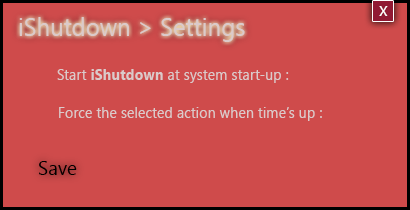
<style>
.page{position:relative;width:410px;height:210px;background:#cf4b4b}
.page>*{position:absolute;margin:0}
.t1{font:19.7px "SegoeUI";color:#ffffff;scale:0.96 1}
.t2{font:25px "SegoeUI";color:#dbcaca;scale:0.96 1}
.t3{font:15px "SegoeUI";color:#dbcaca;scale:0.96 1}
.t4{font:15px "SegoeUI-Bold";color:#dbcaca;scale:0.96 1}
.t5{font:20px "SegoeUI";color:#000000;scale:0.96 1}
</style>
<div class="page">
<p class="t1" style="left:379px;top:6px;width:9px;height:10px">x</p>
<p class="t2" style="left:19px;top:17px;width:226px;height:25px">iShutdown &gt; Settings</p>
<p class="t3" style="left:57px;top:69px;width:232px;height:14px">Start <span class="t4">iShutdown </span>at system start-up :</p>
<p class="t3" style="left:59px;top:107px;width:263px;height:14px">Force the selected action when time’s up :</p>
<p class="t5" style="left:39px;top:161px;width:38px;height:14px">Save</p>
</div>
